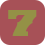
<style>
.page{position:relative;width:45px;height:45px;background:#a75157}
.page>*{position:absolute;margin:0}
.t1{font:50px "Saddlebag-Black";color:#949146}
</style>
<div class="page">
<p class="t1" style="left:8px;top:10px;width:29px;height:26px">7</p>
</div>
